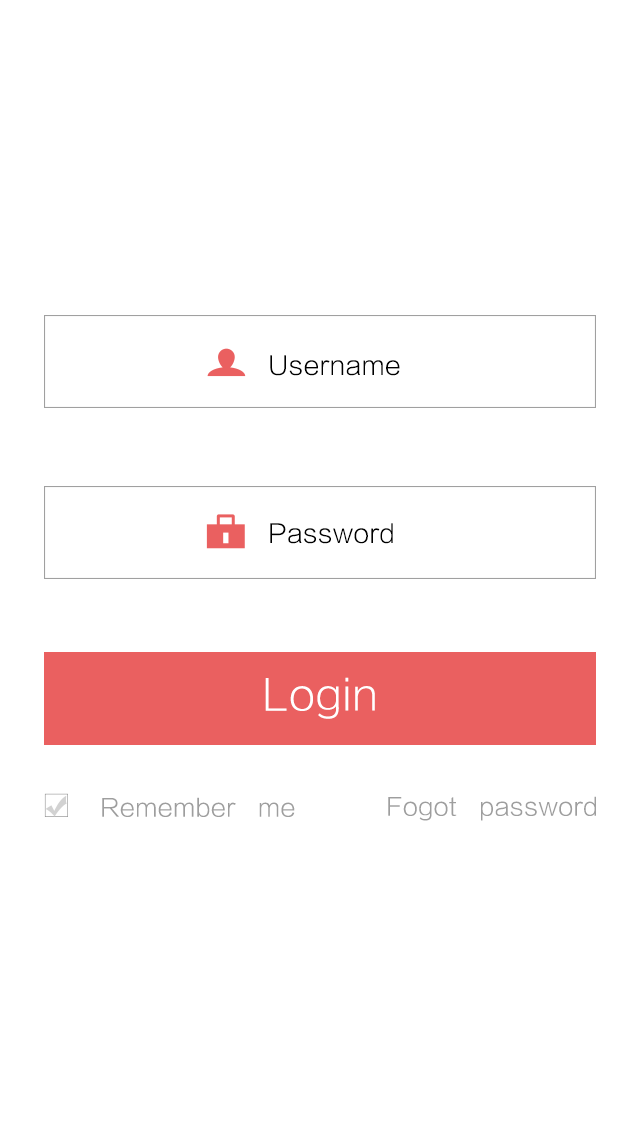
<style>
.page{position:relative;width:640px;height:1136px;background:#ffffff}
.page>*{position:absolute;margin:0}
.t1{font:25px "STHeitiSC-Light";color:#000000}
.t2{font:41.7px "STHeitiSC-Light";color:#ffffff}
.t3{font:24px "STHeitiSC-Light";color:#9e9e9e}
</style>
<div class="page">
<p class="t1" style="left:270px;top:355px;width:130px;height:21px">Username</p>
<p class="t1" style="left:270px;top:523px;width:123px;height:21px">Password</p>
<p class="t2" style="left:265px;top:677px;width:110px;height:42px">Login</p>
<p class="t3" style="left:102px;top:797px;width:193px;height:20px">Remember   me</p>
<p class="t3" style="left:388px;top:796px;width:208px;height:25px">Fogot   password</p>
</div>
